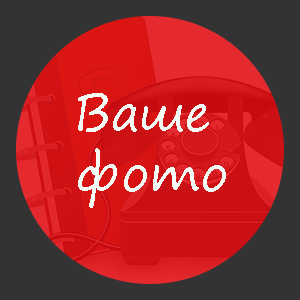
<style>
.page{position:relative;width:300px;height:300px;background:#333333}
.page>*{position:absolute;margin:0}
.t1{font:50px "SegoePrint";color:#f4fbf4}
.t2{font:66.7px "SegoePrint";color:#f4fbf4}
</style>
<div class="page">
<p class="t1" style="left:78px;top:93px;width:148px;height:115px;text-align:center"><span class="t2">    </span>Ваше <br>     фото</p>
</div>
